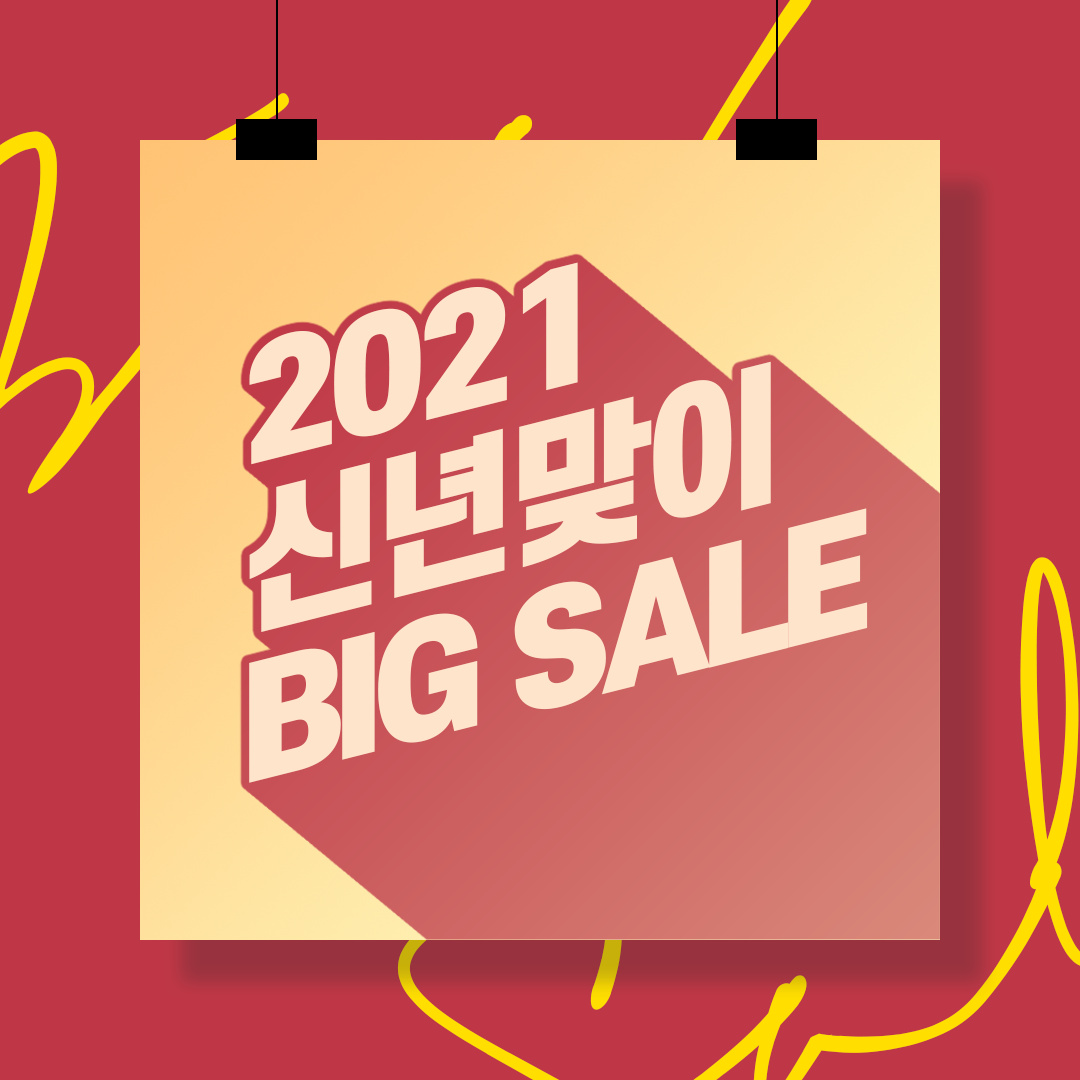
<style>
.page{position:relative;width:1080px;height:1080px;background:#bf3746}
.page>*{position:absolute;margin:0}
.t1{font:148.6px/159.2px "S-CoreDream-9Black";letter-spacing:-0.06em;color:#ffe4cc;scale:1.03 1}
</style>
<div class="page">
<p class="t1" style="left:249px;top:262px;width:619px;height:521px;rotate:-14deg">2021<br>신년맞이<br>BIG SALE</p>
</div>
